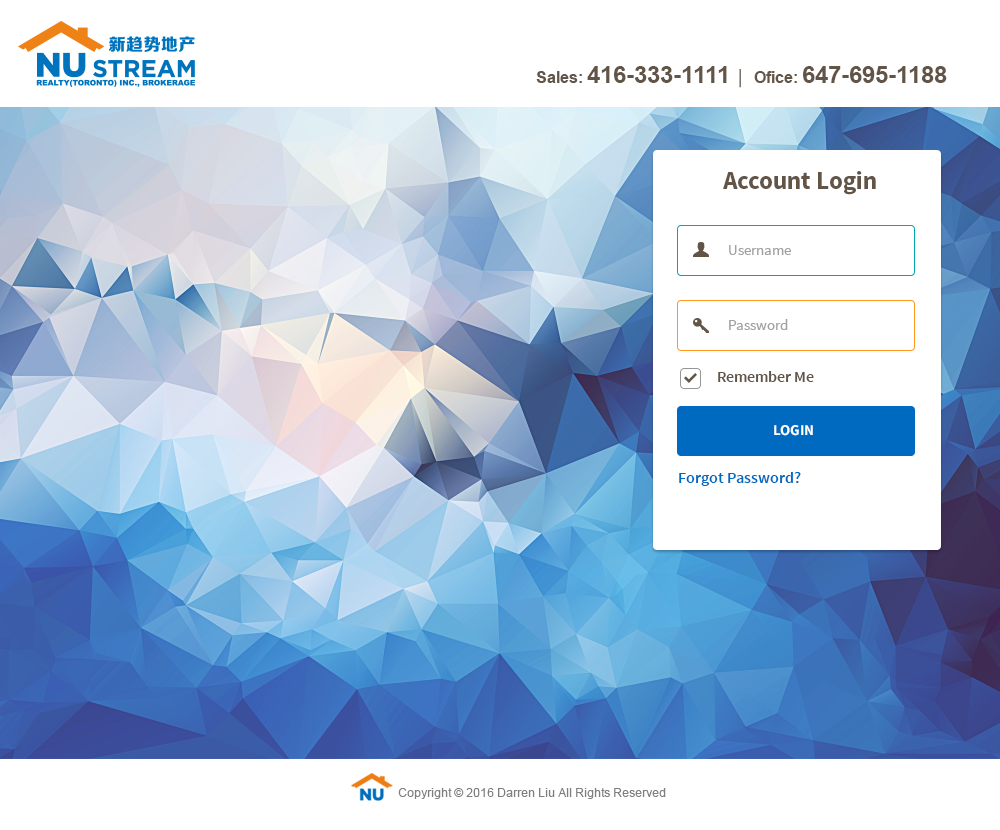
<style>
.page{position:relative;width:1000px;height:830px;background:#ffffff}
.page>*{position:absolute;margin:0}
.t1{font:24px "Arial-BoldMT";color:#625548}
.t2{font:16px "Arial-BoldMT";color:#625548}
.t3{font:16px "AdobeHeitiStd-Regular";color:#625548}
.t4{font:25px "SourceSansPro-Bold";color:#625548}
.t5{font:15px "SourceSansPro-Regular";color:#a1a1a1}
.t6{font:16px "SourceSansPro-Semibold";color:#625548}
.t7{font:15px "SourceSansPro-Bold";color:#ffffff;text-transform:uppercase}
.t8{font:16px "SourceSansPro-Semibold";color:#006ac0}
.t9{font:12px "ArialMT";color:#7f7f7f}
</style>
<div class="page">
<p class="t1" style="left:536px;top:66px;width:411px;height:22px"><span class="t2">Sales: </span>416-333-1111  <span class="t3">|</span><span class="t2">   Ofice: </span>647-695-1188</p>
<p class="t4" style="left:723px;top:171px;width:153px;height:24px">Account Login</p>
<p class="t5" style="left:729px;top:245px;width:62px;height:10px">Username</p>
<p class="t5" style="left:729px;top:319px;width:59px;height:11px">Password</p>
<p class="t6" style="left:718px;top:371px;width:96px;height:11px">Remember Me</p>
<p class="t7" style="left:774px;top:425px;width:39px;height:11px">Login</p>
<p class="t8" style="left:679px;top:472px;width:122px;height:14px">Forgot Password?</p>
<p class="t9" style="left:398px;top:788px;width:268px;height:11px">Copyright © 2016 Darren Liu All Rights Reserved</p>
</div>
